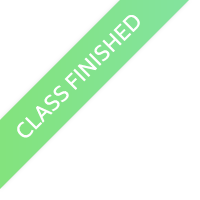
<style>
.page{position:relative;width:200px;height:200px;background:#ffffff}
.page>*{position:absolute;margin:0}
.t1{font:20px "Biryani-Regular";color:#ffffff;text-transform:uppercase}
</style>
<div class="page">
<p class="t1" style="left:17px;top:15px;width:123px;height:123px;rotate:-45deg">Class Finished</p>
</div>
